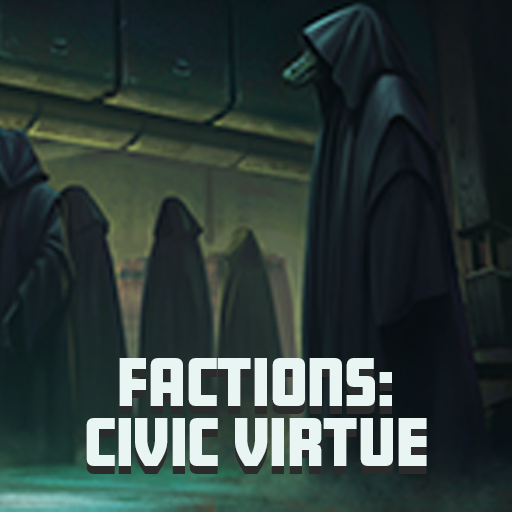
<style>
.page{position:relative;width:512px;height:512px}
.page>*{position:absolute;margin:0}
.t1{font:60px/60px "Amboy-Black";color:#e8f5f3}
</style>
<div class="page">
<p class="t1" style="left:86px;top:366px;width:341px;height:108px;text-align:center">Factions: <br>Civic Virtue</p>
<p class="t1" style="left:86px;top:358px;width:341px;height:108px;text-align:center">Factions: <br>Civic Virtue</p>
</div>
